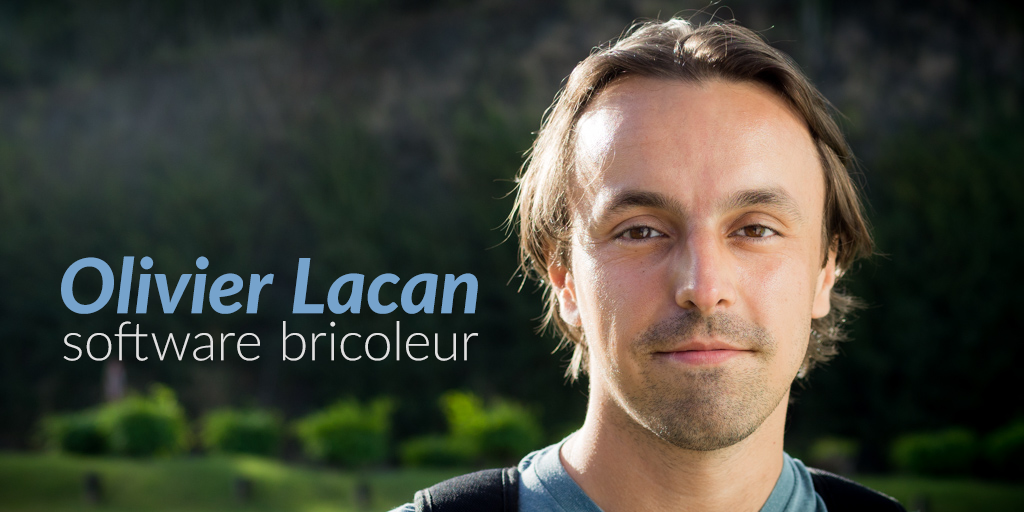
<style>
.page{position:relative;width:1024px;height:512px}
.page>*{position:absolute;margin:0}
.t1{font:76px "Lato-HeavyItalic";letter-spacing:0.01em;color:#76a3cc}
.t2{font:54px "Lato-Light";letter-spacing:0.01em;color:#dfdfdf}
</style>
<div class="page">
<p class="t1" style="left:61px;top:256px;width:417px;height:58px">Olivier Lacan</p>
<p class="t2" style="left:63px;top:321px;width:416px;height:40px">software bricoleur</p>
</div>
